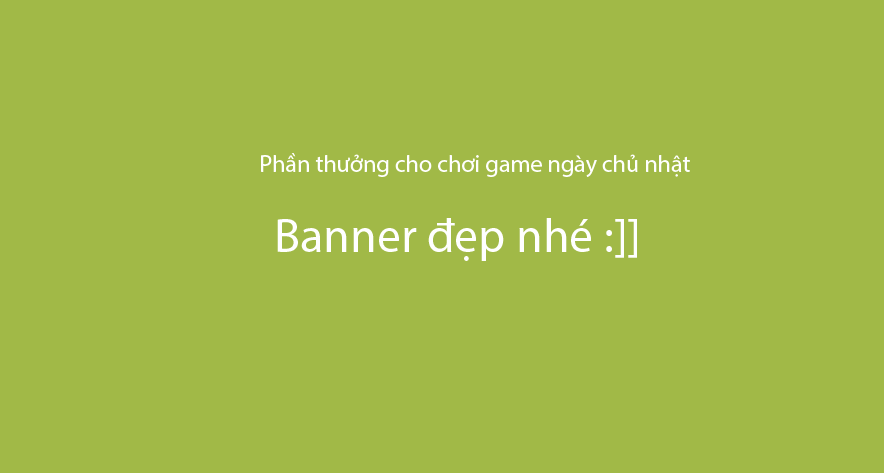
<style>
.page{position:relative;width:884px;height:473px;background:#a1b947}
.page>*{position:absolute;margin:0}
.t1{font:24px "MyriadPro-Regular";color:#ffffff}
.t2{font:47.8px "MyriadPro-Regular";color:#ffffff}
</style>
<div class="page">
<p class="t1" style="left:261px;top:153px;width:429px;height:24px">Phần thưởng cho chơi game ngày chủ nhật</p>
<p class="t2" style="left:277px;top:218px;width:360px;height:43px">Banner đẹp nhé :]]</p>
</div>
